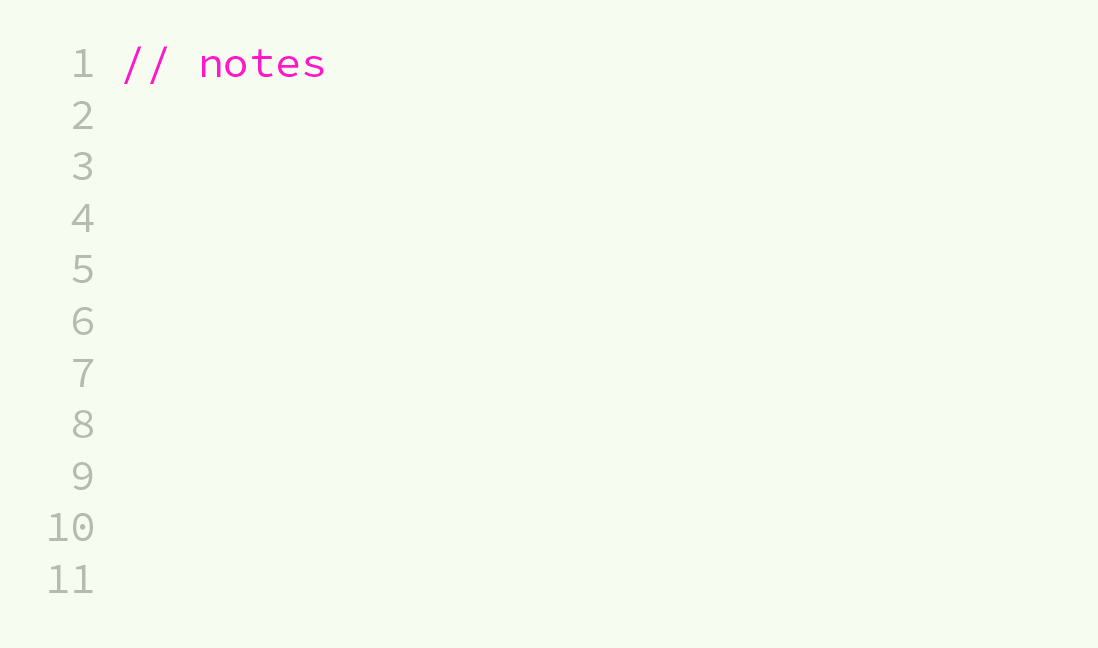
<style>
.page{position:relative;width:1098px;height:648px;background:#f7fcf1}
.page>*{position:absolute;margin:0}
.t1{font:43px "SourceCodePro-Regular";color:#b4bcb1}
.t2{font:43px "SourceCodePro-Regular";color:#ff18c9}
</style>
<div class="page">
<p class="t1" style="left:49px;top:49px;width:45px;height:544px;text-align:right">1<br>2<br>3<br>4<br>5<br>6<br>7<br>8<br>9<br>10<br>11</p>
<p class="t2" style="left:124px;top:46px;width:200px;height:38px">// notes</p>
</div>
